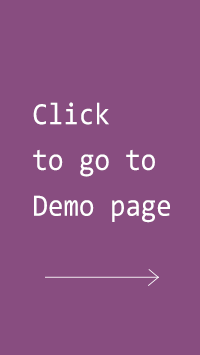
<style>
.page{position:relative;width:200px;height:355px;background:#884d80}
.page>*{position:absolute;margin:0}
.t1{font:31.2px/45.8px "Consolas";color:#ffffff;scale:0.9 1}
</style>
<div class="page">
<p class="t1" style="left:33px;top:102px;width:137px;height:121px">Click<br>to go to<br>Demo page</p>
</div>
